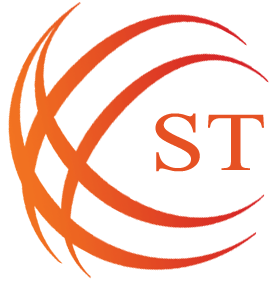
<style>
.page{position:relative;width:273px;height:283px;background:#ffffff}
.page>*{position:absolute;margin:0}
.t1{font:83.4px "FrankRuehl";color:#e65123;scale:1.2 1}
</style>
<div class="page">
<p class="t1" style="left:155px;top:113px;width:109px;height:59px">ST</p>
</div>
